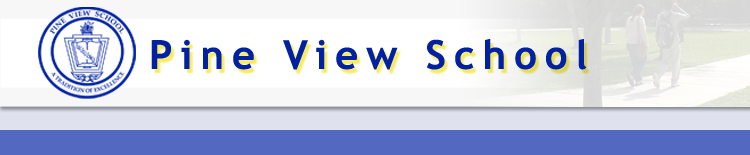
<style>
.page{position:relative;width:750px;height:155px}
.page>*{position:absolute;margin:0}
.t1{font:40px "TrebuchetMS-Bold";letter-spacing:0.2em;color:#0021a4}
</style>
<div class="page">
<p class="t1" style="left:151px;top:39px;width:436px;height:31px">Pine View School</p>
</div>
